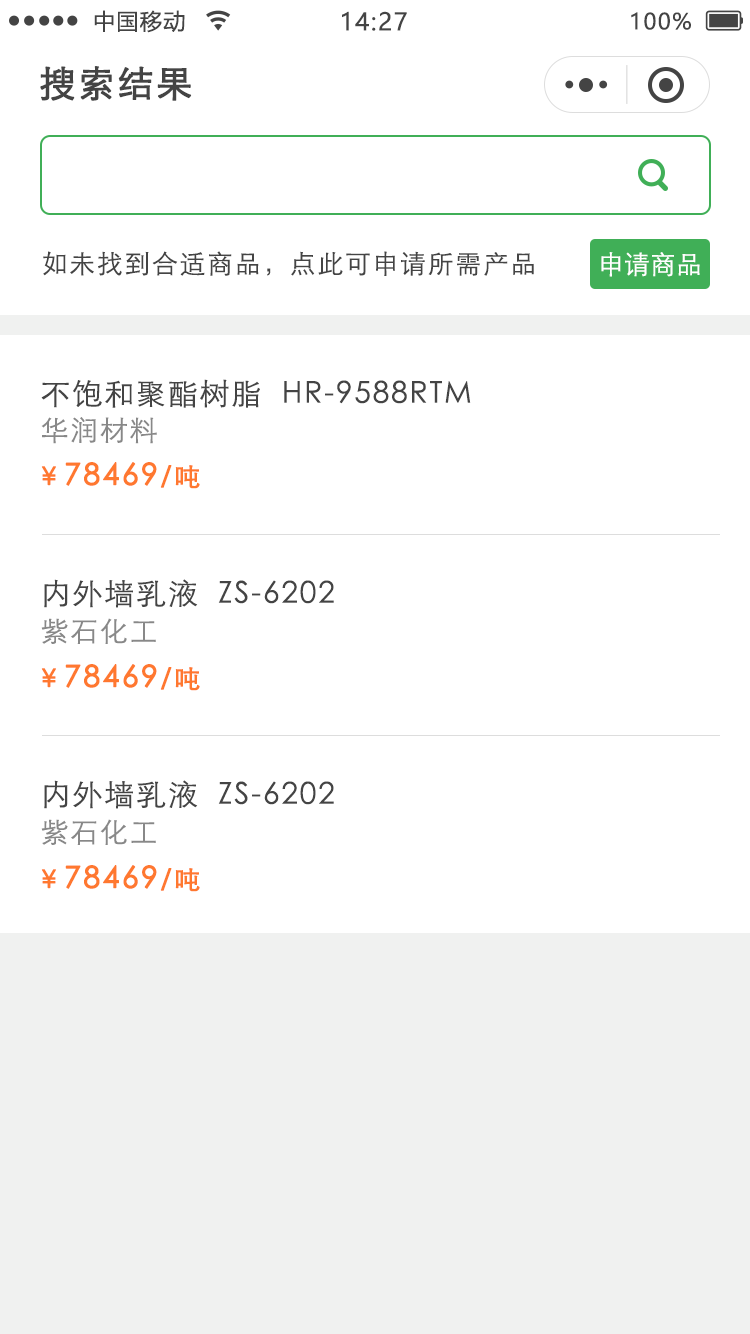
<style>
.page{position:relative;width:750px;height:1334px;background:#ffffff}
.page>*{position:absolute;margin:0}
.t1{font:22px "MicrosoftYaHei";letter-spacing:0.06em;color:#444444}
.t2{font:24px "MicrosoftYaHei";letter-spacing:0.06em;color:#444444}
.t3{font:36px "STXihei";letter-spacing:0.06em;color:#444444;font-weight:bold}
.t4{font:26px "STXihei";letter-spacing:0.06em;color:#444444}
.t5{font:26px "STXihei";color:#ffffff}
.t6{font:30px "STXihei";letter-spacing:0.06em;color:#444444}
.t7{font:28px "STXihei";letter-spacing:0.06em;color:#888888}
.t8{font:30px "STXihei";letter-spacing:0.06em;color:#ff782f;font-weight:bold}
.t9{font:26px "STXihei";letter-spacing:0.06em;color:#ff782f;font-weight:bold}
</style>
<div class="page">
<p class="t1" style="left:94px;top:10px;width:91px;height:23px">中国移动</p>
<p class="t2" style="left:342px;top:11px;width:65px;height:20px">14:27</p>
<p class="t1" style="left:631px;top:12px;width:60px;height:18px">100%</p>
<p class="t3" style="left:40px;top:66px;width:152px;height:35px">搜索结果</p>
<p class="t4" style="left:43px;top:251px;width:491px;height:25px">如未找到合适商品，点此可申请所需产品</p>
<p class="t5" style="left:601px;top:252px;width:99px;height:25px">申请商品</p>
<p class="t6" style="left:41px;top:379px;width:430px;height:29px">不饱和聚酯树脂  HR-9588RTM</p>
<p class="t7" style="left:41px;top:417px;width:116px;height:27px">华润材料</p>
<p class="t8" style="left:41px;top:462px;width:159px;height:27px"><span class="t9">￥</span>78469<span class="t9">/吨</span></p>
<p class="t6" style="left:44px;top:579px;width:290px;height:29px">内外墙乳液  ZS-6202</p>
<p class="t7" style="left:41px;top:618px;width:115px;height:26px">紫石化工</p>
<p class="t8" style="left:41px;top:664px;width:159px;height:27px"><span class="t9">￥</span>78469<span class="t9">/吨</span></p>
<p class="t6" style="left:44px;top:780px;width:290px;height:29px">内外墙乳液  ZS-6202</p>
<p class="t7" style="left:41px;top:819px;width:115px;height:26px">紫石化工</p>
<p class="t8" style="left:41px;top:865px;width:159px;height:27px"><span class="t9">￥</span>78469<span class="t9">/吨</span></p>
</div>
